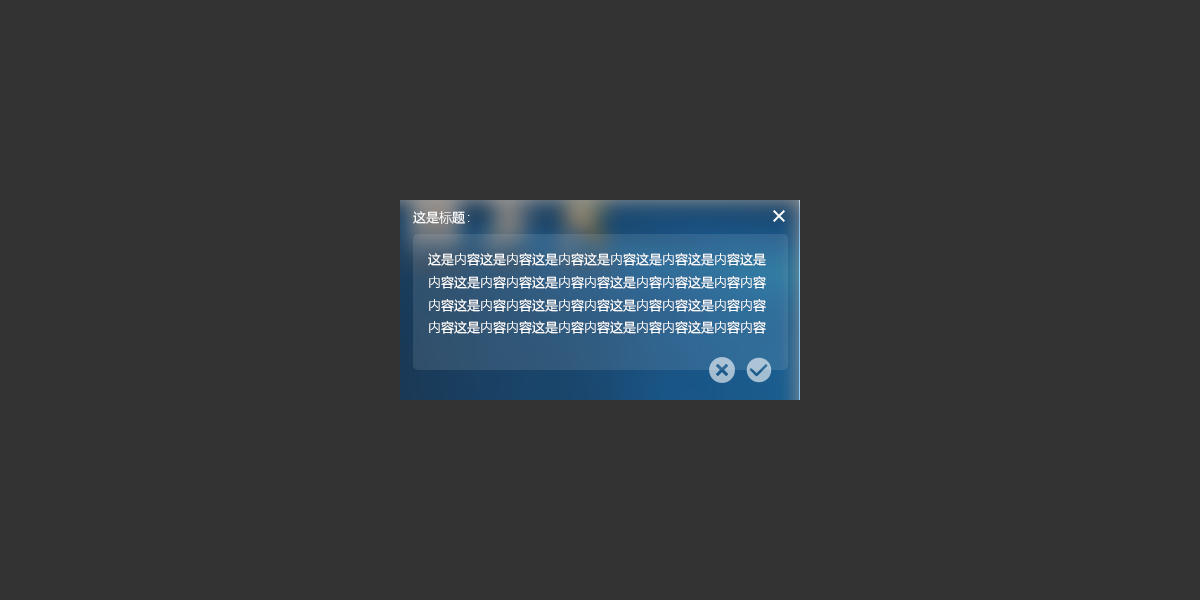
<style>
.page{position:relative;width:1200px;height:600px;background:#333333}
.page>*{position:absolute;margin:0}
.t1{font:13px "MicrosoftYaHeiLight";color:#ffffff}
</style>
<div class="page">
<p class="t1" style="left:413px;top:211px;width:57px;height:13px">这是标题：</p>
<p class="t1" style="left:428px;top:253px;width:338px;height:81px">这是内容这是内容这是内容这是内容这是内容这是内容这是<br>内容这是内容内容这是内容内容这是内容内容这是内容内容<br>内容这是内容内容这是内容内容这是内容内容这是内容内容<br>内容这是内容内容这是内容内容这是内容内容这是内容内容</p>
</div>
